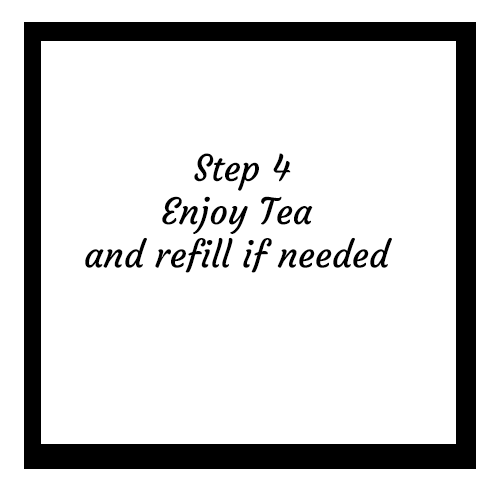
<style>
.page{position:relative;width:500px;height:500px;background:#ffffff}
.page>*{position:absolute;margin:0}
.t1{font:36px "Courgette-Regular";color:#000000}
</style>
<div class="page">
<p class="t1" style="left:85px;top:153px;width:307px;height:120px;text-align:center">Step 4<br>Enjoy Tea <br>and refill if needed</p>
</div>
